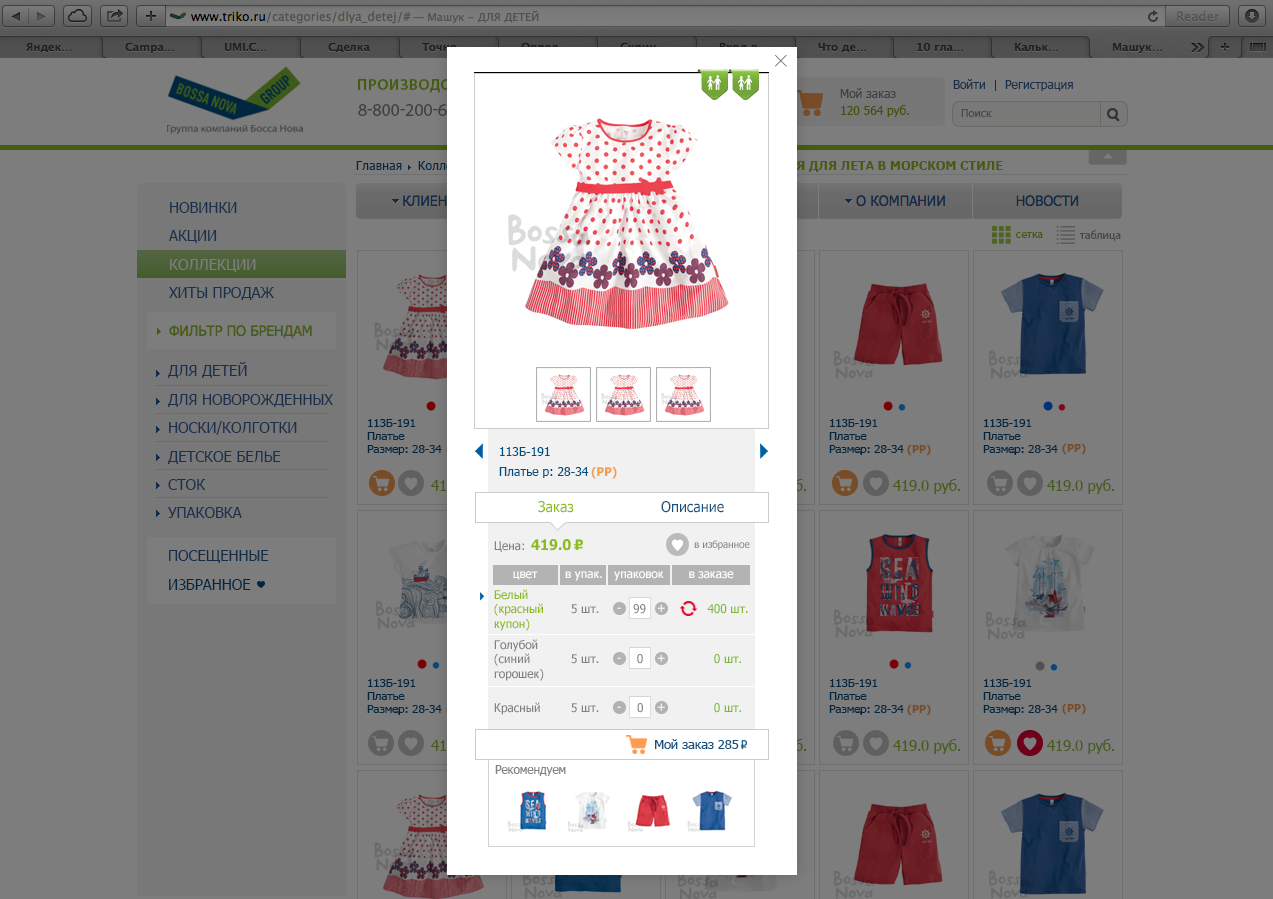
<style>
.page{position:relative;width:1273px;height:899px;background:#7d7d7d}
.page>*{position:absolute;margin:0}
.t1{font:12px "Tahoma";color:#3f4041}
.t2{font:12px "Tahoma";color:#1b304b}
.t3{font:12px "Tahoma";color:#3c5404}
.t4{font:11px "Tahoma";letter-spacing:0.005em;color:#48494b}
.t5{font:12px "Tahoma";color:#00273f;scale:1.04 1}
.t6{font:15.2px/28.4px "Tahoma";letter-spacing:-0.01em;color:#1b304b;text-transform:uppercase}
.t7{font:11.5px "MyriadPro-Regular";color:#455c0d}
.t8{font:11.5px "MyriadPro-Regular";color:#48494b}
.t9{font:15.2px "Tahoma";letter-spacing:-0.01em;color:#7d7d7d;text-transform:uppercase}
.t10{font:11px/13px "Tahoma";color:#00273f;scale:1.05 1}
.t11{font:11px/13px "Tahoma";color:#00273f;text-transform:uppercase;scale:1.05 1}
.t12{font:11.6px/20px "Tahoma";color:#004f81;scale:1.05 1}
.t13{font:11.6px/20px "Tahoma";color:#004f81;text-transform:uppercase;scale:1.05 1}
.t14{font:11px "Tahoma-Bold";letter-spacing:-0.005em;color:#784d25}
.t15{font:12px "Tahoma-Bold";letter-spacing:-0.005em;color:#f59d4b}
.t16{font:15px "Tahoma";letter-spacing:-0.025em;color:#465b15;text-transform:uppercase}
.t17{font:15px "Tahoma";letter-spacing:-0.025em;color:#465b15}
.t18{font:14.8px "Tahoma";letter-spacing:-0.005em;color:#8cbc1a;scale:0.96 1}
.t19{font:14.8px "Tahoma";letter-spacing:-0.005em;color:#17527e;scale:0.96 1}
.t20{font:12px "Tahoma";letter-spacing:-0.005em;color:#808284}
.t21{font:14.8px "Tahoma-Bold";letter-spacing:-0.005em;color:#8cbc1a;scale:0.96 1}
.t22{font:10px "Tahoma";letter-spacing:-0.005em;color:#808284}
.t23{font:15.2px "Tahoma";letter-spacing:-0.01em;color:#152c46;text-transform:uppercase}
.t24{font:15.2px "Tahoma";letter-spacing:-0.01em;color:#00273f;text-transform:uppercase}
.t25{font:12px "Tahoma";letter-spacing:-0.005em;color:#ffffff}
.t26{font:12px "Tahoma";letter-spacing:-0.005em;color:#8cbc1a}
.t27{font:12px "Tahoma";letter-spacing:-0.005em;color:#7bb933}
.t28{font:13px "Tahoma";color:#17527e}
.t29{font:12px "Tahoma";letter-spacing:-0.01em;color:#808284}
</style>
<div class="page">
<p class="t1" style="left:840px;top:88px;width:56px;height:10px">Мой заказ</p>
<p class="t2" style="left:953px;top:79px;width:32px;height:10px">Войти</p>
<p class="t2" style="left:1005px;top:80px;width:68px;height:11px">Регистрация</p>
<p class="t3" style="left:841px;top:105px;width:68px;height:12px">120 564 руб.</p>
<p class="t4" style="left:961px;top:109px;width:31px;height:8px">Поиск</p>
<p class="t5" style="left:356px;top:161px;width:46px;height:9px">Главная</p>
<p class="t6" style="left:169px;top:202px;width:105px;height:98px">НОВИНКИ<br>акции<br>коллекции<br>хиты продаж</p>
<p class="t7" style="left:1016px;top:232px;width:27px;height:6px">сетка</p>
<p class="t8" style="left:1080px;top:230px;width:41px;height:11px">таблица</p>
<p class="t9" style="left:170px;top:259px;width:86px;height:13px">коллекции</p>
<p class="t6" style="left:168px;top:362px;width:165px;height:156px">ДЛЯ ДЕТЕЙ<br>ДЛЯ НОВОРОЖДЕННЫХ<br>НОСКИ/КОЛГОТКИ<br>ДЕТСКОЕ БЕЛЬЕ<br>СТОК<br>УПАКОВКА</p>
<p class="t10" style="left:367px;top:419px;width:75px;height:36px"><span class="t11">113Б-191<br>П</span>латье<br>Размер: 28-34</p>
<p class="t10" style="left:829px;top:419px;width:75px;height:36px"><span class="t11">113Б-191<br>П</span>латье<br>Размер: 28-34</p>
<p class="t10" style="left:983px;top:419px;width:75px;height:36px"><span class="t11">113Б-191<br>П</span>латье<br>Размер: 28-34</p>
<p class="t12" style="left:499px;top:447px;width:90px;height:31px"><span class="t13">113Б-191<br>П</span>латье р: 28-34</p>
<p class="t14" style="left:907px;top:444px;width:24px;height:12px">(РР)</p>
<p class="t14" style="left:1062px;top:443px;width:24px;height:12px">(РР)</p>
<p class="t15" style="left:591px;top:467px;width:26px;height:12px">(РР)</p>
<p class="t16" style="left:893px;top:479px;width:67px;height:15px">419.0 <span class="t17">руб.</span></p>
<p class="t16" style="left:1047px;top:479px;width:67px;height:15px">419.0 <span class="t17">руб.</span></p>
<p class="t18" style="left:538px;top:501px;width:36px;height:12px">Заказ</p>
<p class="t19" style="left:661px;top:501px;width:63px;height:12px">Описание</p>
<p class="t20" style="left:494px;top:541px;width:30px;height:11px">Цена:</p>
<p class="t21" style="left:531px;top:539px;width:40px;height:12px">419.0</p>
<p class="t22" style="left:694px;top:540px;width:56px;height:10px">в избранное</p>
<p class="t23" style="left:169px;top:550px;width:100px;height:13px">ПОСЕЩЕННЫЕ</p>
<p class="t24" style="left:169px;top:579px;width:82px;height:11px">Избранное</p>
<p class="t25" style="left:513px;top:571px;width:25px;height:9px">цвет</p>
<p class="t25" style="left:565px;top:571px;width:37px;height:10px">в упак.</p>
<p class="t25" style="left:614px;top:571px;width:50px;height:10px">упаковок</p>
<p class="t25" style="left:689px;top:571px;width:45px;height:8px">в заказе</p>
<p class="t26" style="left:494px;top:589px;width:49px;height:42px">Белый<br>(красный<br>купон)</p>
<p class="t20" style="left:571px;top:604px;width:28px;height:10px">5 шт.</p>
<p class="t20" style="left:633px;top:604px;width:13px;height:10px">99</p>
<p class="t25" style="left:657px;top:604px;width:8px;height:8px">+</p>
<p class="t27" style="left:707px;top:604px;width:41px;height:10px">400 шт.</p>
<p class="t25" style="left:617px;top:607px;width:4px;height:2px">-</p>
<p class="t20" style="left:494px;top:639px;width:50px;height:42px">Голубой<br>(синий<br>горошек)</p>
<p class="t20" style="left:571px;top:654px;width:28px;height:10px">5 шт.</p>
<p class="t20" style="left:637px;top:654px;width:6px;height:10px">0</p>
<p class="t25" style="left:657px;top:654px;width:8px;height:8px">+</p>
<p class="t27" style="left:714px;top:654px;width:27px;height:10px">0 шт.</p>
<p class="t25" style="left:617px;top:657px;width:4px;height:2px">-</p>
<p class="t10" style="left:367px;top:679px;width:75px;height:36px"><span class="t11">113Б-191<br>П</span>латье<br>Размер: 28-34</p>
<p class="t10" style="left:829px;top:679px;width:75px;height:36px"><span class="t11">113Б-191<br>П</span>латье<br>Размер: 28-34</p>
<p class="t10" style="left:983px;top:679px;width:75px;height:36px"><span class="t11">113Б-191<br>П</span>латье<br>Размер: 28-34</p>
<p class="t20" style="left:494px;top:702px;width:46px;height:13px">Красный</p>
<p class="t20" style="left:571px;top:703px;width:28px;height:10px">5 шт.</p>
<p class="t25" style="left:617px;top:706px;width:4px;height:2px">-</p>
<p class="t20" style="left:637px;top:703px;width:6px;height:10px">0</p>
<p class="t25" style="left:657px;top:703px;width:8px;height:8px">+</p>
<p class="t27" style="left:714px;top:703px;width:27px;height:10px">0 шт.</p>
<p class="t14" style="left:907px;top:704px;width:24px;height:12px">(РР)</p>
<p class="t14" style="left:1062px;top:703px;width:24px;height:12px">(РР)</p>
<p class="t28" style="left:655px;top:739px;width:84px;height:10px">Мой заказ 285</p>
<p class="t16" style="left:893px;top:739px;width:67px;height:15px">419.0 <span class="t17">руб.</span></p>
<p class="t16" style="left:1047px;top:739px;width:67px;height:15px">419.0 <span class="t17">руб.</span></p>
<p class="t29" style="left:495px;top:765px;width:71px;height:11px">Рекомендуем</p>
</div>
